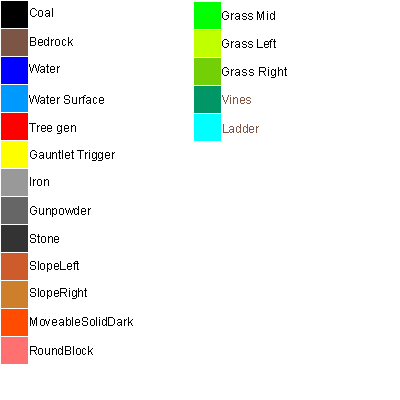
<style>
.page{position:relative;width:400px;height:400px;background:#ffffff}
.page>*{position:absolute;margin:0}
.t1{font:12px "ArialMT";color:#000000}
.t2{font:12px "ArialMT";color:#7d5544}
</style>
<div class="page">
<p class="t1" style="left:30px;top:8px;width:23px;height:9px">Coal</p>
<p class="t1" style="left:222px;top:11px;width:53px;height:9px">Grass Mid</p>
<p class="t1" style="left:30px;top:37px;width:43px;height:9px">Bedrock</p>
<p class="t1" style="left:222px;top:39px;width:54px;height:9px">Grass Left</p>
<p class="t1" style="left:29px;top:64px;width:31px;height:9px">Water</p>
<p class="t1" style="left:29px;top:95px;width:75px;height:9px">Water Surface</p>
<p class="t2" style="left:222px;top:95px;width:29px;height:9px">Vines</p>
<p class="t1" style="left:29px;top:123px;width:47px;height:11px">Tree gen</p>
<p class="t2" style="left:223px;top:124px;width:36px;height:9px">Ladder</p>
<p class="t1" style="left:30px;top:150px;width:85px;height:11px">Gauntlet Trigger</p>
<p class="t1" style="left:30px;top:177px;width:19px;height:9px">Iron</p>
<p class="t1" style="left:30px;top:206px;width:61px;height:11px">Gunpowder</p>
<p class="t1" style="left:30px;top:234px;width:29px;height:9px">Stone</p>
<p class="t1" style="left:30px;top:261px;width:49px;height:11px">SlopeLeft</p>
<p class="t1" style="left:30px;top:288px;width:57px;height:11px">SlopeRight</p>
<p class="t1" style="left:30px;top:317px;width:103px;height:9px">MoveableSolidDark</p>
<p class="t1" style="left:30px;top:346px;width:63px;height:9px">RoundBlock</p>
</div>
